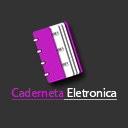
<style>
.page{position:relative;width:128px;height:128px;background:#333333}
.page>*{position:absolute;margin:0}
.t1{font:12.1px "MyriadHebrew-Regular";color:#ffffff;text-decoration:underline}
.t2{font:12.1px "MyriadHebrew-Regular";color:#c11ec1;text-decoration:underline}
</style>
<div class="page">
<p class="t1" style="left:11px;top:88px;width:106px;height:12px"><span class="t2">Caderneta</span> Eletronica</p>
</div>
